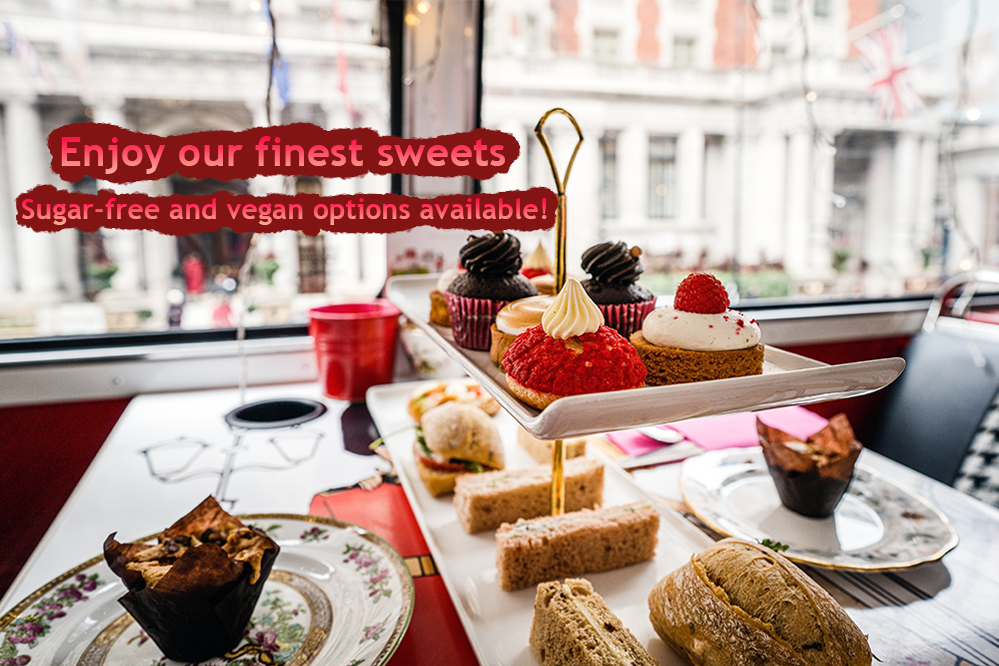
<style>
.page{position:relative;width:999px;height:666px}
.page>*{position:absolute;margin:0}
.t1{font:40px "TrebuchetMS-Bold";letter-spacing:0.01em}
.t2{font:28px "TrebuchetMS-Bold";letter-spacing:0.01em}
</style>
<div class="page">
<p class="t1" style="left:61px;top:136px;width:444px;height:38px">Enjoy our finest sweets</p>
<p class="t2" style="left:22px;top:198px;width:525px;height:27px">Sugar-free and vegan options available!</p>
</div>
